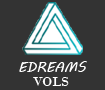
<style>
.page{position:relative;width:105px;height:90px;background:#333333}
.page>*{position:absolute;margin:0}
.t1{font:14px "MVBoli";color:#ffffff}
.t2{font:14px "BodoniMT";color:#ffffff}
</style>
<div class="page">
<p class="t1" style="left:19px;top:61px;width:68px;height:11px">EDREAMS</p>
<p class="t2" style="left:33px;top:77px;width:36px;height:9px">VOLS</p>
</div>
